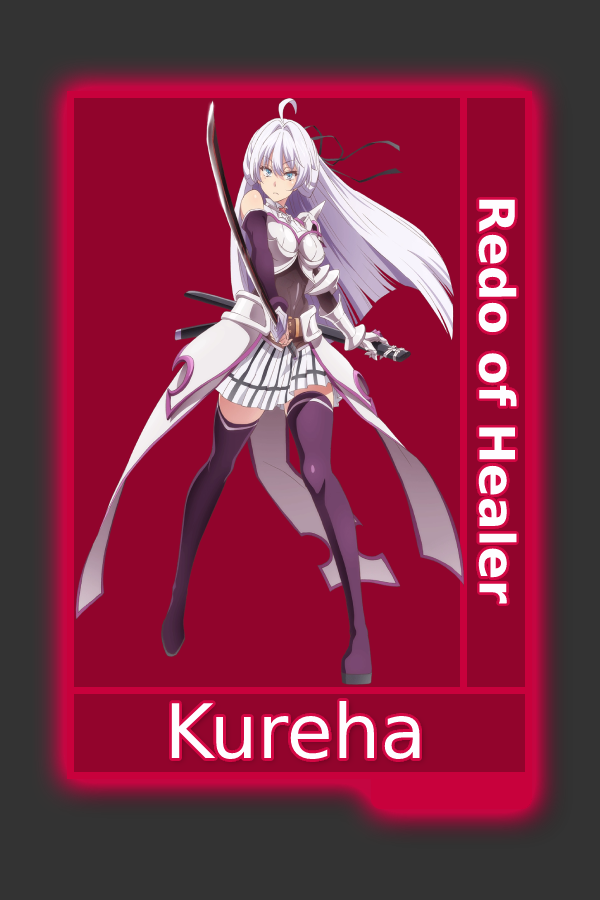
<style>
.page{position:relative;width:600px;height:900px;background:#91042c}
.page>*{position:absolute;margin:0}
.t1{font:48.8px "MADETOMMY-Bold";color:#fefdff}
.t2{font:75px "CoolveticaRg-Regular";color:#fefdff}
</style>
<div class="page">
<p class="t1" style="left:478px;top:199px;width:39px;height:405px;rotate:90deg">Redo of Healer</p>
<p class="t2" style="left:171px;top:701px;width:249px;height:59px">Kureha</p>
</div>
